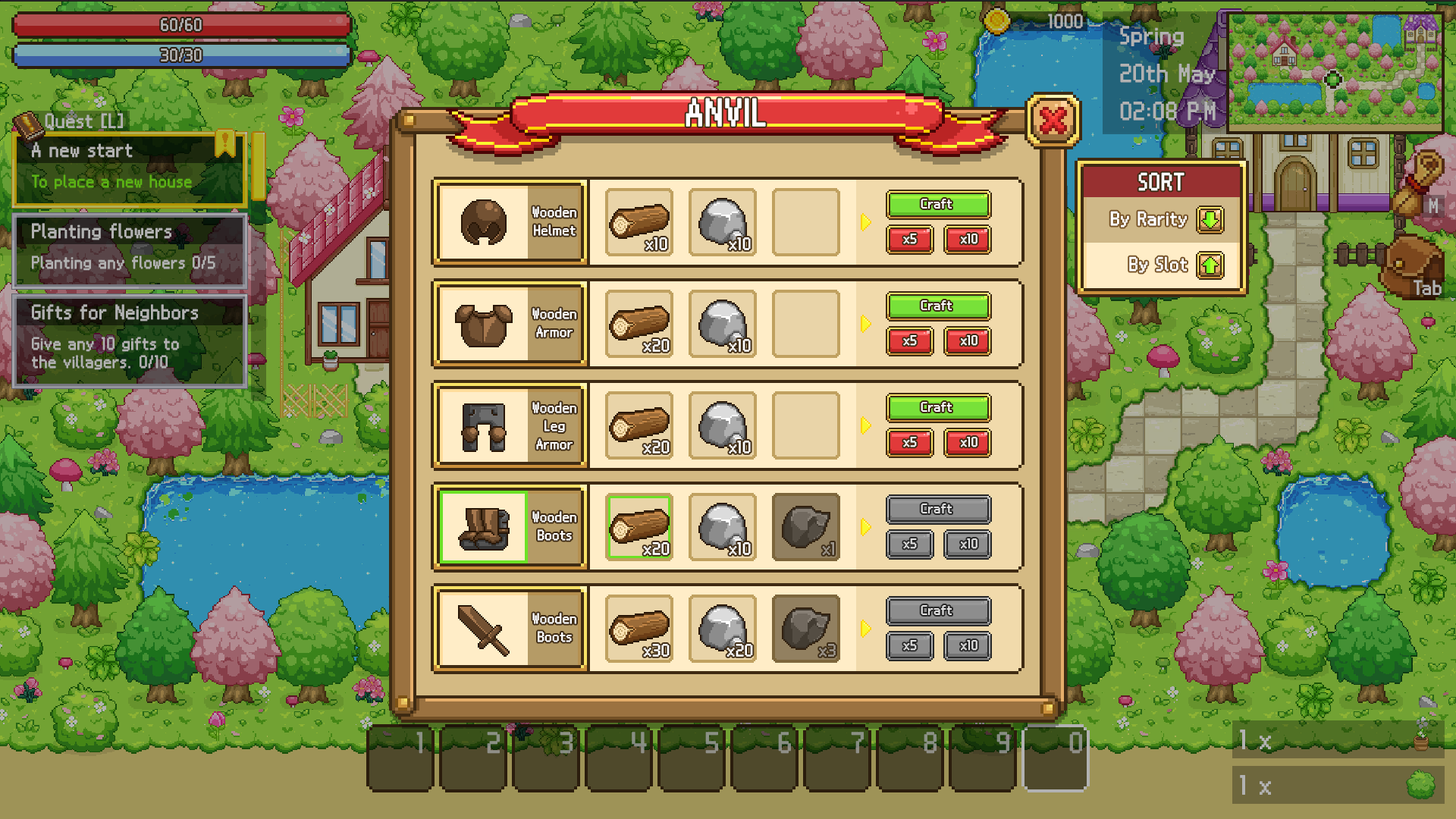
<style>
.page{position:relative;width:1456px;height:819px}
.page>*{position:absolute;margin:0}
.t1{font:30.3px "Galmuri9-Regular";letter-spacing:0.03em;color:#ffffff;text-transform:uppercase;font-weight:bold}
.t2{font:19px "Galmuri9-Regular";letter-spacing:0.03em;color:#ffffff;text-transform:uppercase;font-weight:bold}
.t3{font:11.4px/18.2px "Galmuri9-Regular";letter-spacing:0.03em;color:#ffffff;font-weight:bold}
.t4{font:10.6px "Galmuri9-Regular";letter-spacing:0.03em;color:#ffffff;font-weight:bold}
.t5{font:15.2px "Galmuri9-Regular";letter-spacing:0.03em;color:#ffffff;font-weight:bold}
.t6{font:13.6px "Galmuri9-Regular";letter-spacing:0.03em;color:#ffffff;font-weight:bold}
.t7{font:10.6px "Galmuri9-Regular";letter-spacing:0.03em;color:#e1e1e1;font-weight:bold}
.t8{font:13.6px "Galmuri9-Regular";letter-spacing:0.03em;color:#9d958b;font-weight:bold}
</style>
<div class="page">
<p class="t1" style="left:686px;top:98px;width:80px;height:29px">Anvil</p>
<p class="t2" style="left:1138px;top:172px;width:47px;height:19px">Sort</p>
<p class="t3" style="left:532px;top:206px;width:44px;height:30px;text-align:center">Wooden<br>Helmet</p>
<p class="t4" style="left:921px;top:199px;width:31px;height:10px">Craft</p>
<p class="t5" style="left:1110px;top:211px;width:77px;height:16px">By Rarity</p>
<p class="t4" style="left:903px;top:234px;width:14px;height:10px">x5</p>
<p class="t4" style="left:961px;top:234px;width:16px;height:10px">x10</p>
<p class="t6" style="left:645px;top:237px;width:22px;height:13px">x10</p>
<p class="t6" style="left:729px;top:237px;width:22px;height:13px">x10</p>
<p class="t5" style="left:1129px;top:256px;width:58px;height:17px">By Slot</p>
<p class="t4" style="left:921px;top:300px;width:31px;height:10px">Craft</p>
<p class="t3" style="left:532px;top:308px;width:44px;height:29px;text-align:center">Wooden<br>Armor</p>
<p class="t6" style="left:643px;top:339px;width:27px;height:13px">x20</p>
<p class="t6" style="left:729px;top:339px;width:22px;height:13px">x10</p>
<p class="t4" style="left:903px;top:335px;width:14px;height:11px">x5</p>
<p class="t4" style="left:961px;top:335px;width:16px;height:11px">x10</p>
<p class="t3" style="left:532px;top:402px;width:44px;height:48px;text-align:center">Wooden<br>Leg<br>Armor</p>
<p class="t4" style="left:921px;top:402px;width:31px;height:10px">Craft</p>
<p class="t4" style="left:903px;top:437px;width:14px;height:10px">x5</p>
<p class="t4" style="left:961px;top:437px;width:16px;height:10px">x10</p>
<p class="t6" style="left:643px;top:441px;width:27px;height:12px">x20</p>
<p class="t6" style="left:729px;top:441px;width:22px;height:12px">x10</p>
<p class="t7" style="left:921px;top:504px;width:31px;height:9px">Craft</p>
<p class="t3" style="left:532px;top:511px;width:44px;height:30px;text-align:center">Wooden<br>Boots</p>
<p class="t6" style="left:643px;top:542px;width:27px;height:13px">x20</p>
<p class="t6" style="left:729px;top:542px;width:22px;height:13px">x10</p>
<p class="t8" style="left:822px;top:542px;width:12px;height:13px">x1</p>
<p class="t7" style="left:903px;top:538px;width:14px;height:11px">x5</p>
<p class="t7" style="left:961px;top:538px;width:16px;height:11px">x10</p>
<p class="t7" style="left:921px;top:605px;width:31px;height:10px">Craft</p>
<p class="t3" style="left:532px;top:613px;width:44px;height:29px;text-align:center">Wooden<br>Boots</p>
<p class="t7" style="left:903px;top:640px;width:14px;height:11px">x5</p>
<p class="t7" style="left:961px;top:640px;width:16px;height:11px">x10</p>
<p class="t6" style="left:643px;top:644px;width:27px;height:13px">x30</p>
<p class="t6" style="left:726px;top:644px;width:27px;height:13px">x20</p>
<p class="t8" style="left:819px;top:644px;width:17px;height:13px">x3</p>
</div>
